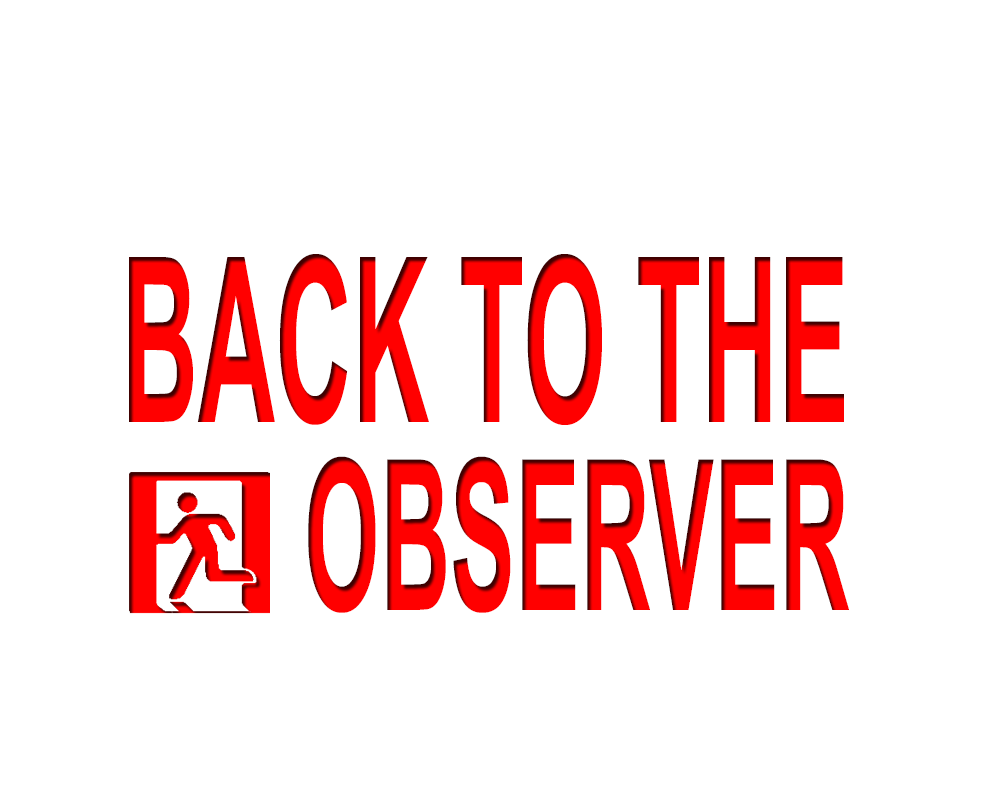
<style>
.page{position:relative;width:1000px;height:800px;background:#ffffff}
.page>*{position:absolute;margin:0}
.t1{font:230.6px/187.9px "Arial-BoldMT";color:#ff0000;scale:0.46 1}
.t2{font:210.1px/187.9px "Arial-BoldMT";color:#ff0000;scale:0.46 1}
</style>
<div class="page">
<p class="t1" style="left:129px;top:254px;width:720px;height:359px;text-align:right">BACK TO THE<br><span class="t2">OBSERVER</span></p>
</div>
